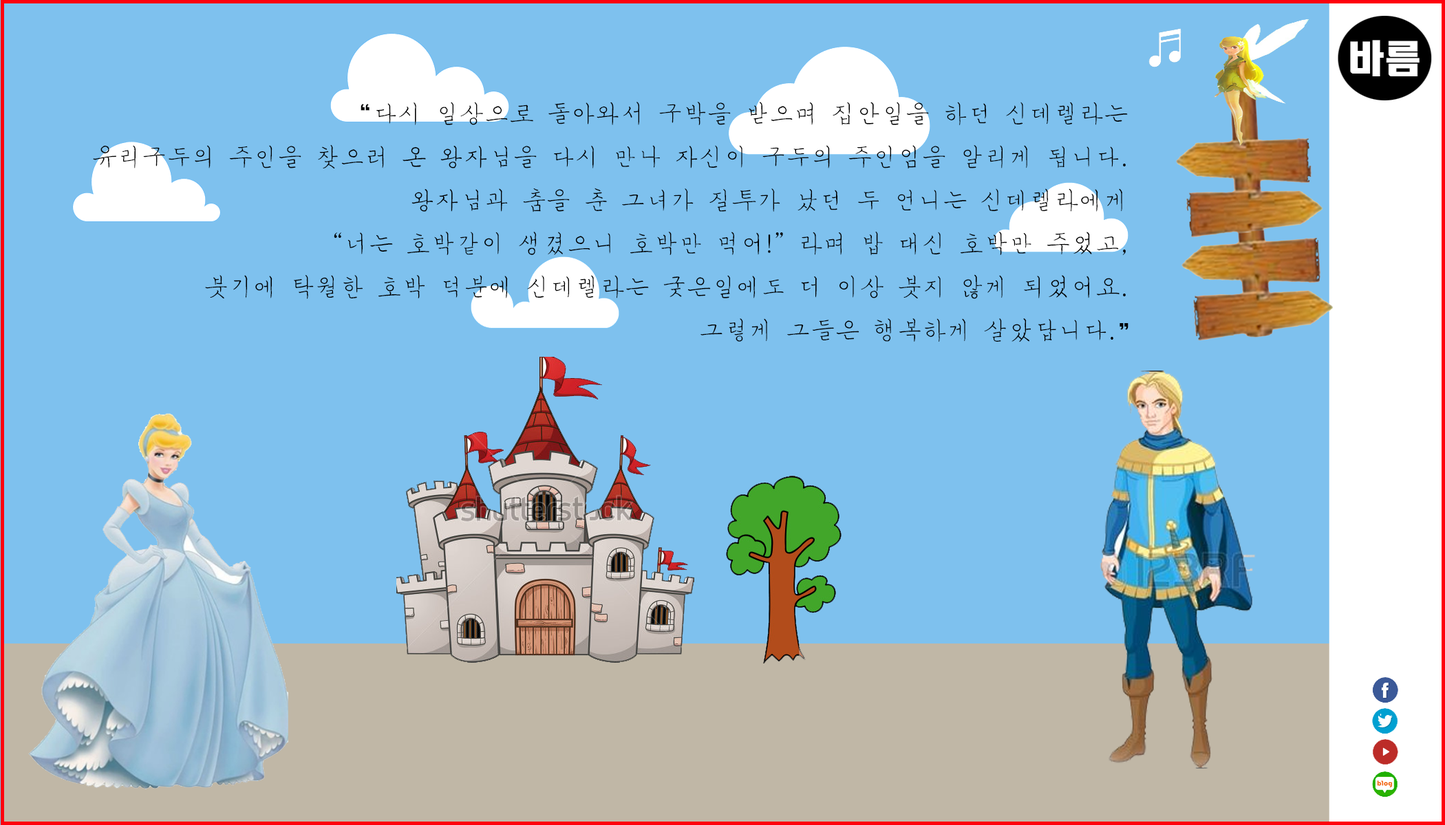
<style>
.page{position:relative;width:1445px;height:825px;background:#7ec1ee}
.page>*{position:absolute;margin:0}
.t1{font:24.8px "MSugiJeong";color:#000000}
.t2{font:24.8px "HeadlineR-HM";color:#000000}
.t3{font:24.8px "Gulim";color:#000000}
</style>
<div class="page">
<p class="t1" style="left:93px;top:102px;width:1035px;height:241px;text-align:right"><span class="t2">“</span>다시 일상으로 돌아와서 구박을 받으며 집안일을 하던 신데렐라는 <br>유리구두의 주인을 찾으러 온 왕자님을 다시 만나 자신이 구두의 주인임을 알리게 됩니다<span class="t3">.</span> <br>왕자님과 춤을 춘 그녀가 질투가 났던 두 언니는 신데렐라에게 <br><span class="t3">“</span>너는 호박같이 생겼으니 호박만 먹어<span class="t3">!”</span> 라며 밥 대신 호박만 주었고<span class="t3">,</span> <br>붓기에 탁월한 호박 덕분에 신데렐라는 궂은일에도 더 이상 붓지 않게 되었어요<span class="t3">.</span> <br>그렇게 그들은 행복하게 살았답니다<span class="t3">.</span><span class="t2">”</span></p>
</div>
